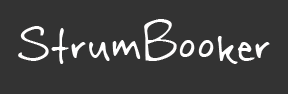
<style>
.page{position:relative;width:288px;height:94px;background:#333333}
.page>*{position:absolute;margin:0}
.t1{font:60px "Rabiohead";color:#fffefe}
</style>
<div class="page">
<p class="t1" style="left:18px;top:19px;width:252px;height:45px">StrumBooker</p>
</div>
